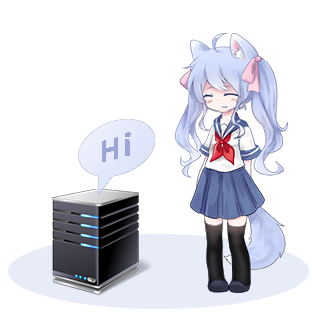
<style>
.page{position:relative;width:312px;height:312px;background:#ffffff}
.page>*{position:absolute;margin:0}
.t1{font:27.7px "NotoSansCJKtc-Bold";letter-spacing:0.12em;color:#9ca5d5}
</style>
<div class="page">
<p class="t1" style="left:102px;top:132px;width:29px;height:30px">Hi</p>
</div>
